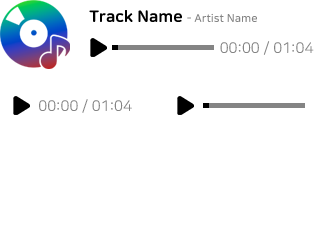
<style>
.page{position:relative;width:317px;height:251px;background:#ffffff}
.page>*{position:absolute;margin:0}
.t1{font:11.1px "NanumSquareRoundOTFB";color:#848484}
.t2{font:16.2px "NanumSquareRoundOTFEB";color:#000000}
.t3{font:14.9px "NanumSquareRoundOTFR";color:#848484}
</style>
<div class="page">
<p class="t1" style="left:89px;top:10px;width:168px;height:12px"><span class="t2">Track Name </span>- Artist Name</p>
<p class="t3" style="left:220px;top:41px;width:94px;height:14px">00:00 / 01:04</p>
<p class="t3" style="left:39px;top:99px;width:93px;height:14px">00:00 / 01:04</p>
</div>
